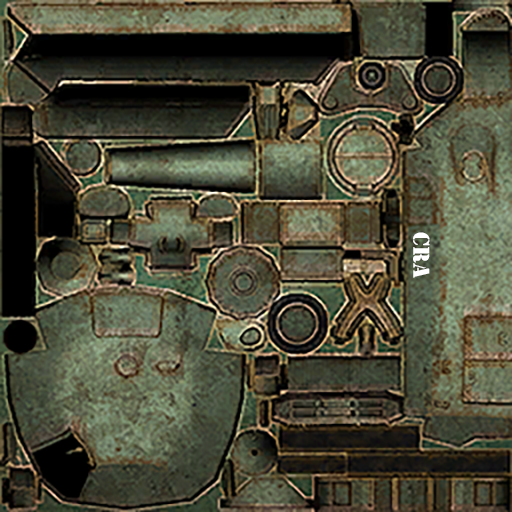
<style>
.page{position:relative;width:512px;height:512px}
.page>*{position:absolute;margin:0}
.t1{font:24px "Stencil";color:#ffffff}
</style>
<div class="page">
<p class="t1" style="left:413px;top:232px;width:17px;height:46px;rotate:90deg">CRA</p>
</div>
